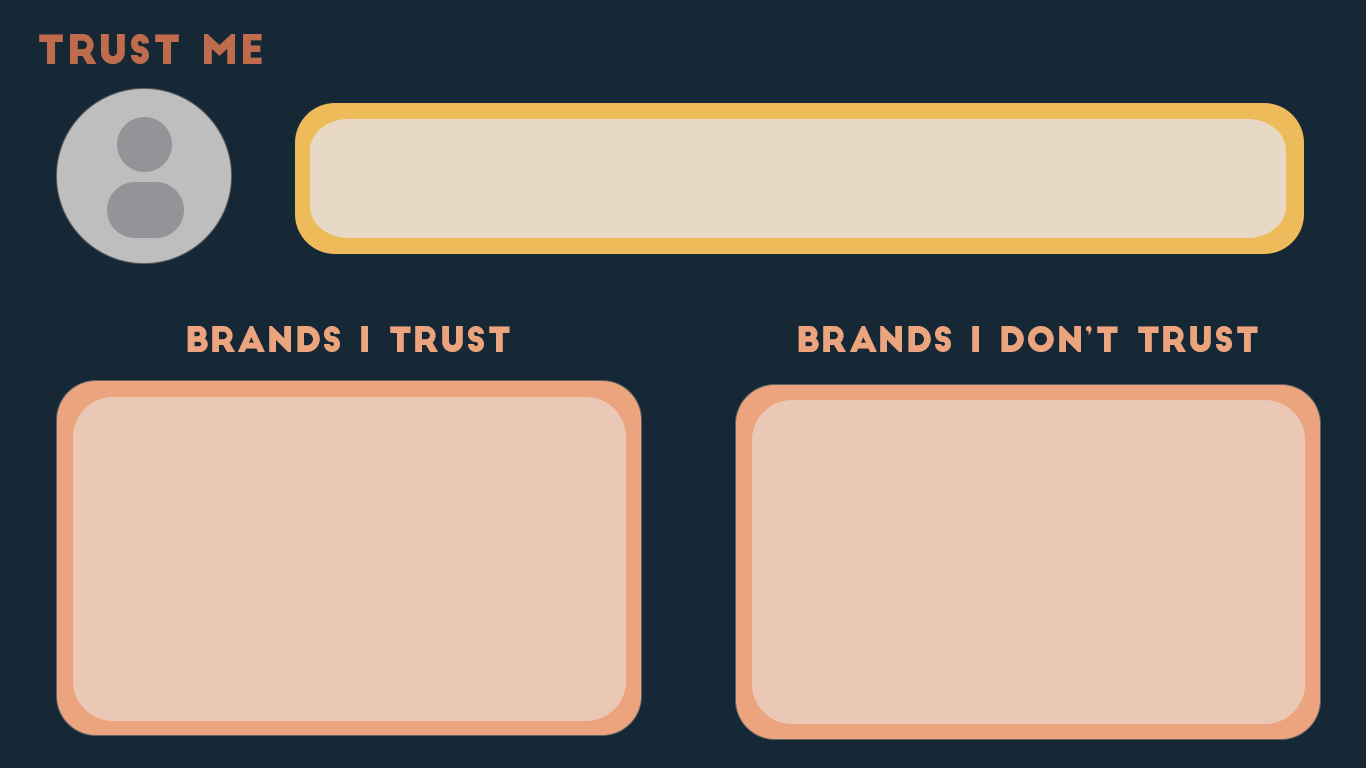
<style>
.page{position:relative;width:1366px;height:768px;background:#162836}
.page>*{position:absolute;margin:0}
.t1{font:39.8px "BigJohn";letter-spacing:0.025em;color:#bf6c4c}
.t2{font:34px "BigJohn";letter-spacing:0.025em;color:#eba47e}
</style>
<div class="page">
<p class="t1" style="left:39px;top:34px;width:223px;height:30px">TRUST ME</p>
<p class="t2" style="left:187px;top:326px;width:323px;height:26px">BRANDS I TRUST</p>
<p class="t2" style="left:798px;top:326px;width:460px;height:26px">BRANDS I DON’T TRUST</p>
</div>
